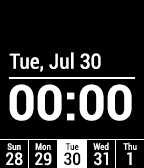
<style>
.page{position:relative;width:144px;height:168px;background:#000000}
.page>*{position:absolute;margin:0}
.t1{font:21px "Roboto-Condensed";letter-spacing:0.01em;color:#ffffff}
.t2{font:48.9px "Roboto-Bold";color:#ffffff}
.t3{font:9px "Roboto-Condensed";letter-spacing:0.01em;color:#ffffff}
.t4{font:9px "Roboto-Condensed";letter-spacing:0.01em;color:#000000}
.t5{font:17px "Roboto-Condensed";letter-spacing:0.01em;color:#ffffff}
.t6{font:17px "Roboto-Condensed";letter-spacing:0.01em;color:#000000}
</style>
<div class="page">
<p class="t1" style="left:9px;top:52px;width:92px;height:20px">Tue, Jul 30</p>
<p class="t2" style="left:9px;top:84px;width:123px;height:37px">00:00</p>
<p class="t3" style="left:7px;top:143px;width:14px;height:7px">Sun</p>
<p class="t3" style="left:35px;top:143px;width:16px;height:7px">Mon</p>
<p class="t4" style="left:65px;top:143px;width:14px;height:7px">Tue</p>
<p class="t3" style="left:93px;top:142px;width:16px;height:8px">Wed</p>
<p class="t3" style="left:123px;top:142px;width:14px;height:8px">Thu</p>
<p class="t5" style="left:6px;top:152px;width:17px;height:14px">28</p>
<p class="t5" style="left:35px;top:152px;width:17px;height:14px">29</p>
<p class="t6" style="left:64px;top:152px;width:17px;height:14px">30</p>
<p class="t5" style="left:94px;top:152px;width:14px;height:14px">31</p>
<p class="t5" style="left:127px;top:152px;width:5px;height:13px">1</p>
</div>
